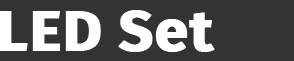
<style>
.page{position:relative;width:294px;height:61px;background:#333333}
.page>*{position:absolute;margin:0}
.t1{font:57px "FiraSans-Bold";color:#ffffff;font-weight:bold;scale:1.05 1}
</style>
<div class="page">
<p class="t1" style="left:0px;top:10px;width:215px;height:42px">LED Set</p>
</div>
